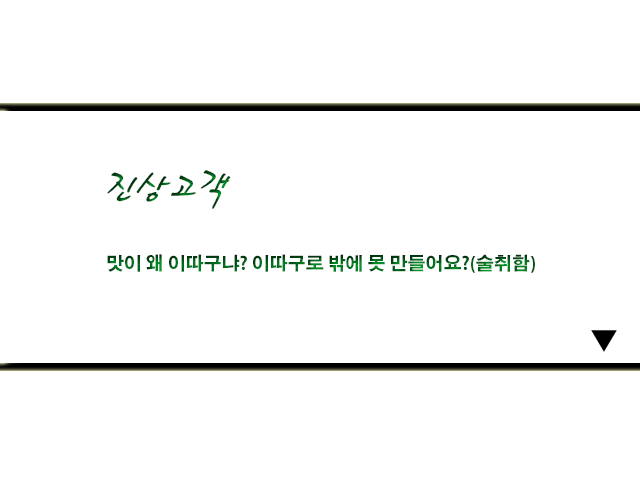
<style>
.page{position:relative;width:640px;height:480px;background:#ffffff}
.page>*{position:absolute;margin:0}
.t1{font:18px "AdobeGothicStd-Bold"}
.t2{font:48px "HaanCjaB"}
</style>
<div class="page">
<p class="t1" style="left:107px;top:170px;width:428px;height:103px"><span class="t2">진상고객<br><br></span>맛이 왜 이따구냐? 이따구로 밖에 못 만들어요?(술취함)</p>
</div>
